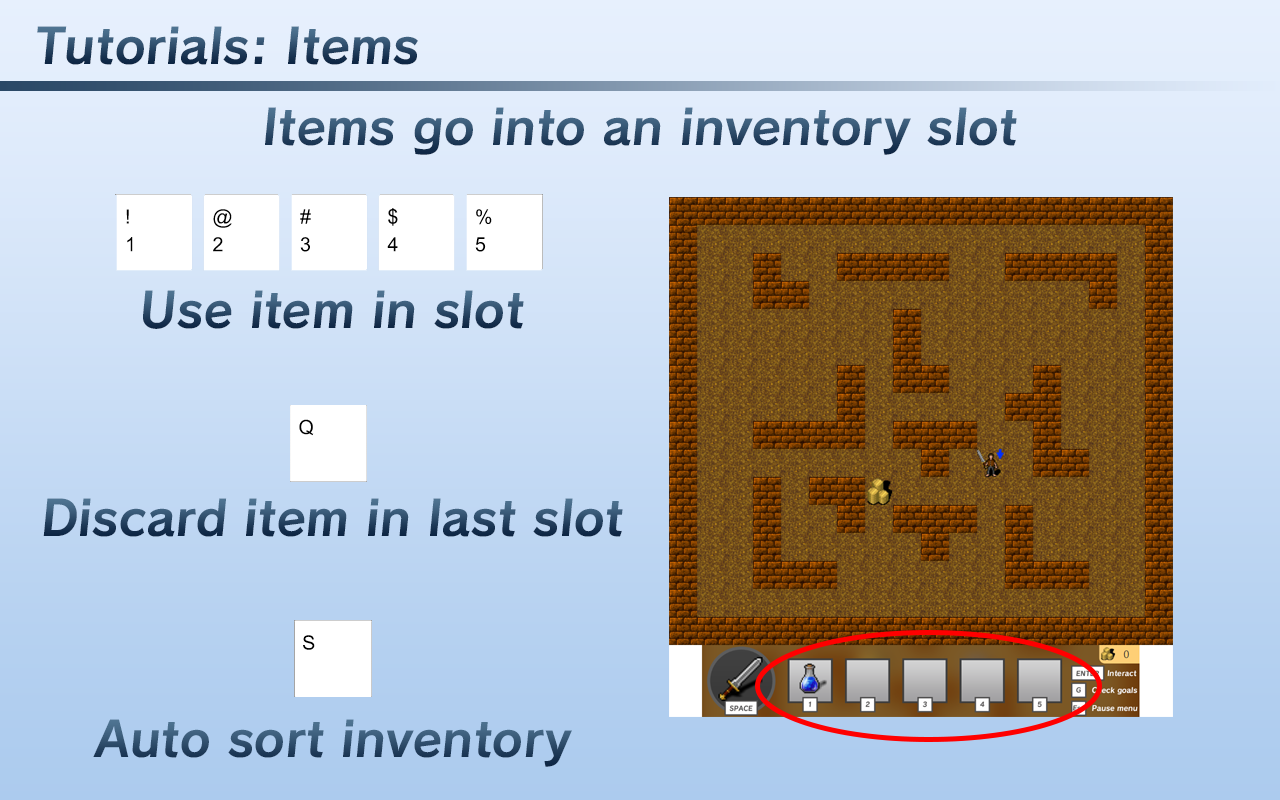
<style>
.page{position:relative;width:1280px;height:800px}
.page>*{position:absolute;margin:0}
.t1{font:48px "Calamity-Bold"}
</style>
<div class="page">
<p class="t1" style="left:37px;top:26px;width:381px;height:39px">Tutorials: Items</p>
<p class="t1" style="left:265px;top:107px;width:752px;height:48px">Items go into an inventory slot</p>
<p class="t1" style="left:143px;top:290px;width:381px;height:39px">Use item in slot</p>
<p class="t1" style="left:43px;top:498px;width:580px;height:39px">Discard item in last slot</p>
<p class="t1" style="left:93px;top:719px;width:479px;height:48px">Auto sort inventory</p>
</div>
